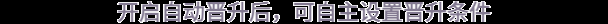
<style>
.page{position:relative;width:608px;height:24px;background:#000000}
.page>*{position:absolute;margin:0}
.t1{font:22px "WebPSD-18463539-0-Regular";color:#837a91;font-weight:bold}
</style>
<div class="page">
<p class="t1" style="left:0px;top:0px;width:608px;height:24px">开启自动晋升后，可自主设置晋升条件</p>
</div>
